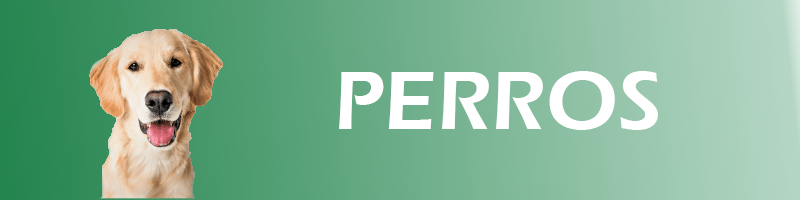
<style>
.page{position:relative;width:800px;height:200px}
.page>*{position:absolute;margin:0}
.t1{font:86.2px "ErasITC-Demi";color:#ffffff}
</style>
<div class="page">
<p class="t1" style="left:339px;top:71px;width:319px;height:59px">PERROS</p>
</div>
